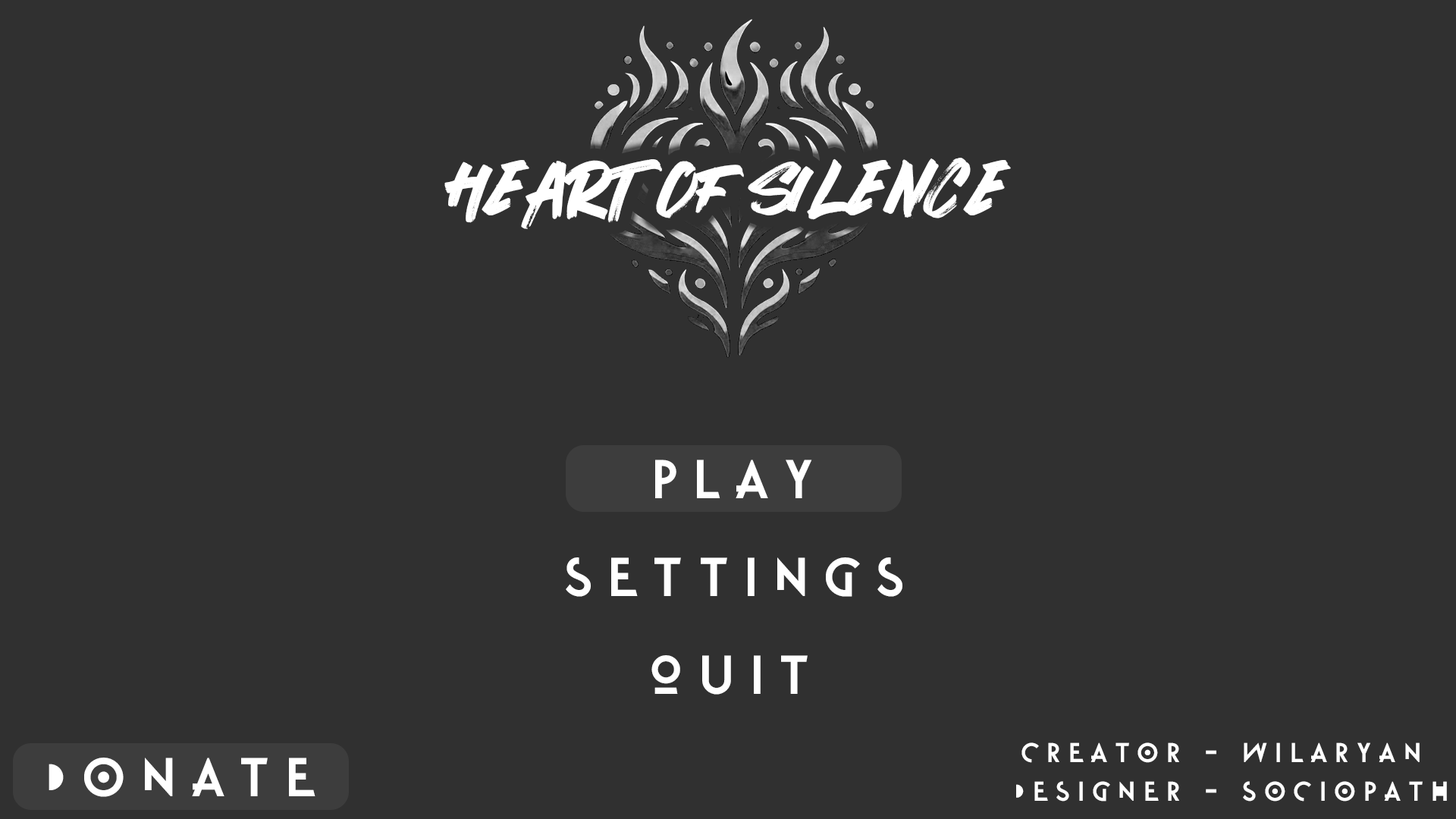
<style>
.page{position:relative;width:1456px;height:819px;background:#303030}
.page>*{position:absolute;margin:0}
.t1{font:76.6px "RhythmicRUS";color:#ffffff}
.t2{font:54.6px "FlatironRegular";letter-spacing:0.28em;color:#ffffff}
.t3{font:27.3px "FlatironRegular";letter-spacing:0.28em;color:#ffffff}
</style>
<div class="page">
<p class="t1" style="left:444px;top:158px;width:567px;height:71px">HEART OF SILENCE</p>
<p class="t2" style="left:655px;top:460px;width:157px;height:38px">PLAY</p>
<p class="t2" style="left:566px;top:557px;width:336px;height:40px">SETTINGS</p>
<p class="t2" style="left:651px;top:655px;width:157px;height:40px">QUIT</p>
<p class="t3" style="left:1021px;top:742px;width:399px;height:21px">CREATOR - WILARYAN</p>
<p class="t2" style="left:49px;top:758px;width:266px;height:39px">DONATE</p>
<p class="t3" style="left:1016px;top:781px;width:431px;height:21px">designer - SOCIOPATH</p>
</div>
